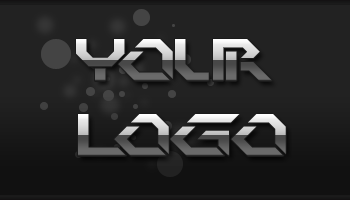
<style>
.page{position:relative;width:350px;height:200px;background:#222222}
.page>*{position:absolute;margin:0}
.t1{font:60px "PerfectDark(BRK)"}
</style>
<div class="page">
<p class="t1" style="left:76px;top:39px;width:197px;height:42px">Your</p>
<p class="t1" style="left:78px;top:114px;width:208px;height:42px">Logo</p>
</div>
